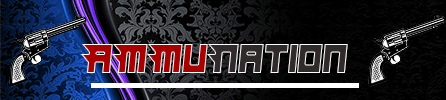
<style>
.page{position:relative;width:446px;height:100px}
.page>*{position:absolute;margin:0}
.t1{font:41.7px "Hindsight2020";color:#a80000;scale:0.94 1}
.t2{font:41.7px "Hindsight2020";color:#302a2a;scale:0.94 1}
</style>
<div class="page">
<p class="t1" style="left:81px;top:44px;width:127px;height:29px">AMMu</p>
<p class="t2" style="left:207px;top:44px;width:141px;height:29px">Nation</p>
</div>
